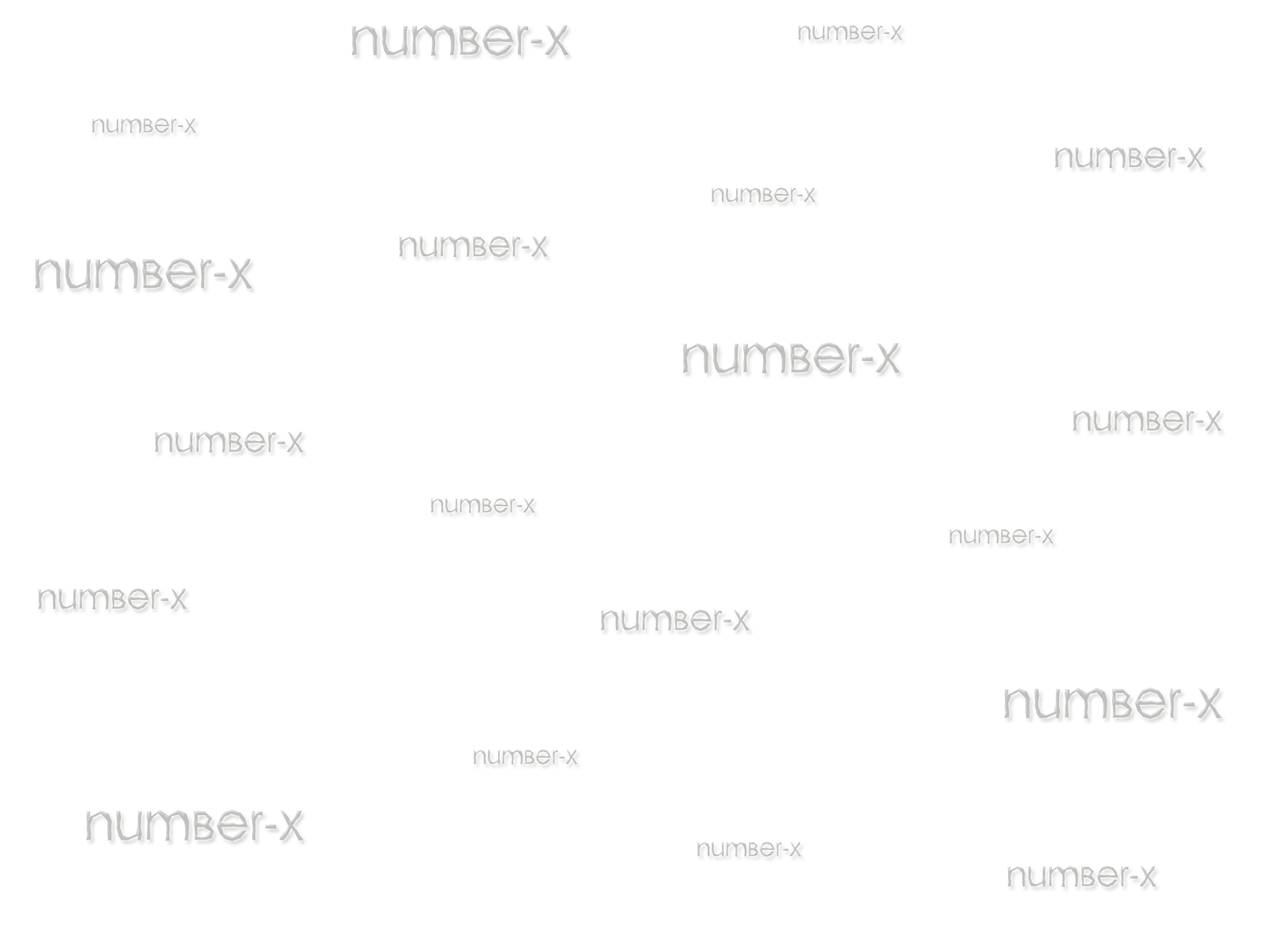
<style>
.page{position:relative;width:1261px;height:946px;background:#ffffff}
.page>*{position:absolute;margin:0}
.t1{font:49.5px "a_AvanteCpsLCBrk-Light";color:#bfbfbf}
.t2{font:23.6px "a_AvanteCpsLCBrk-Light";color:#bfbfbf}
.t3{font:33.8px "a_AvanteCpsLCBrk-Light";color:#bfbfbf}
</style>
<div class="page">
<p class="t1" style="left:351px;top:24px;width:219px;height:32px">number-x</p>
<p class="t2" style="left:798px;top:24px;width:104px;height:16px">number-x</p>
<p class="t2" style="left:92px;top:117px;width:104px;height:16px">number-x</p>
<p class="t3" style="left:1054px;top:147px;width:149px;height:22px">number-x</p>
<p class="t2" style="left:712px;top:187px;width:104px;height:16px">number-x</p>
<p class="t3" style="left:399px;top:236px;width:149px;height:22px">number-x</p>
<p class="t1" style="left:35px;top:258px;width:218px;height:31px">number-x</p>
<p class="t1" style="left:682px;top:342px;width:219px;height:32px">number-x</p>
<p class="t3" style="left:1073px;top:410px;width:149px;height:22px">number-x</p>
<p class="t3" style="left:154px;top:431px;width:149px;height:22px">number-x</p>
<p class="t2" style="left:431px;top:497px;width:104px;height:16px">number-x</p>
<p class="t2" style="left:950px;top:528px;width:104px;height:16px">number-x</p>
<p class="t3" style="left:38px;top:588px;width:149px;height:22px">number-x</p>
<p class="t3" style="left:601px;top:609px;width:148px;height:22px">number-x</p>
<p class="t1" style="left:1004px;top:687px;width:218px;height:32px">number-x</p>
<p class="t2" style="left:474px;top:749px;width:104px;height:15px">number-x</p>
<p class="t1" style="left:86px;top:809px;width:218px;height:32px">number-x</p>
<p class="t2" style="left:697px;top:841px;width:104px;height:16px">number-x</p>
<p class="t3" style="left:1007px;top:865px;width:149px;height:22px">number-x</p>
</div>
